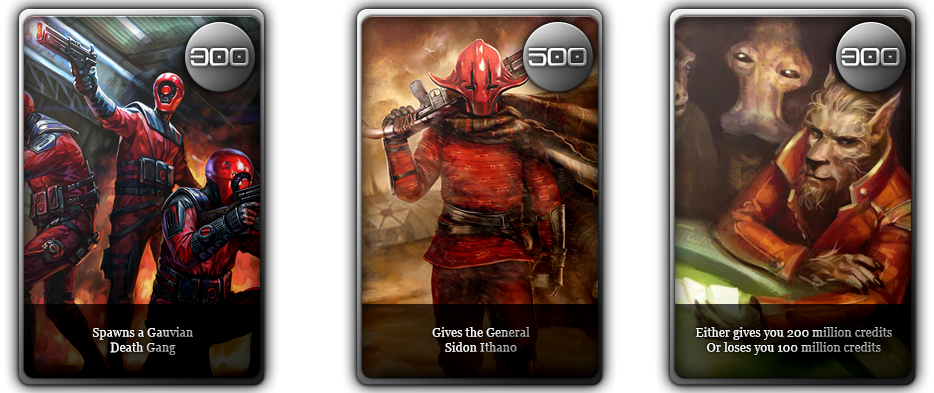
<style>
.page{position:relative;width:934px;height:393px}
.page>*{position:absolute;margin:0}
.t1{font:25px "Aurebesh-Bold"}
.t2{font:12.5px "Georgia"}
</style>
<div class="page">
<p class="t1" style="left:190px;top:48px;width:59px;height:19px">300</p>
<p class="t1" style="left:528px;top:48px;width:59px;height:19px">500</p>
<p class="t1" style="left:841px;top:48px;width:59px;height:19px">300</p>
<p class="t2" style="left:92px;top:327px;width:101px;height:28px;text-align:center">Spawns a Gauvian<br>Death Gang</p>
<p class="t2" style="left:432px;top:327px;width:98px;height:25px;text-align:center">Gives the General<br>Sidon Ithano</p>
<p class="t2" style="left:695px;top:327px;width:197px;height:28px;text-align:center">Either gives you 200 million credits<br>Or loses you 100 million credits</p>
</div>
